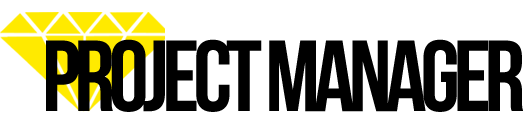
<style>
.page{position:relative;width:523px;height:127px;background:#ffffff}
.page>*{position:absolute;margin:0}
.t1{font:100.6px "BebasNeueBold";letter-spacing:-0.06em;color:#000000}
</style>
<div class="page">
<p class="t1" style="left:46px;top:39px;width:477px;height:73px">PROJECT MANAGER</p>
</div>
